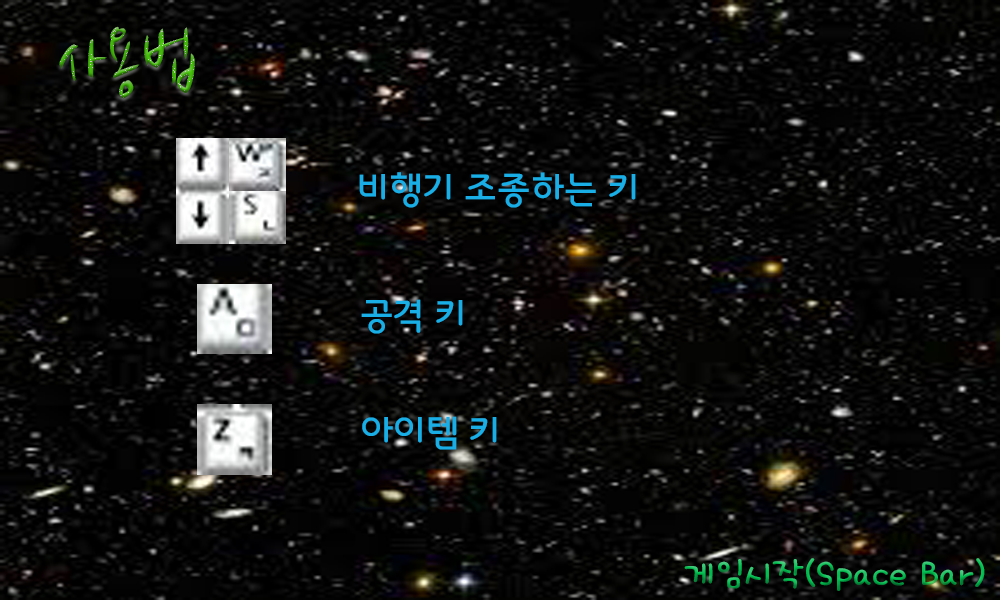
<style>
.page{position:relative;width:1000px;height:600px}
.page>*{position:absolute;margin:0}
.t1{font:80px "NanumBrush"}
.t2{font:36px "KoreanSMI-M";color:#19aee5}
.t3{font:40px "KoreanHNDB-R"}
</style>
<div class="page">
<p class="t1" style="left:59px;top:26px;width:136px;height:73px">사용법</p>
<p class="t2" style="left:359px;top:172px;width:277px;height:36px">비행기 조종하는 키</p>
<p class="t2" style="left:361px;top:299px;width:102px;height:35px">공격 키</p>
<p class="t2" style="left:362px;top:416px;width:135px;height:34px">아이템 키</p>
<p class="t3" style="left:684px;top:558px;width:301px;height:33px">게임시작(Space Bar)</p>
</div>
